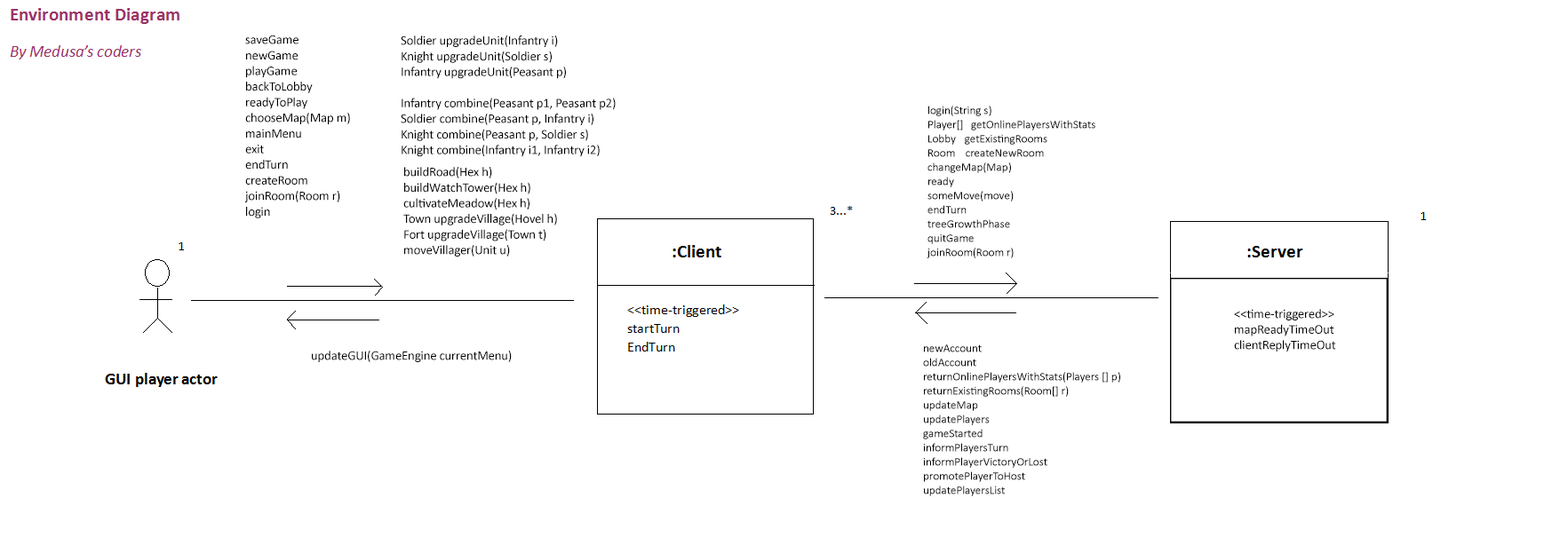
<style>
.page{position:relative;width:1568px;height:545px;background:#ffffff}
.page>*{position:absolute;margin:0}
.t1{font:13px "Calibri";letter-spacing:-0.01em;color:#000000}
.t2{font:11.8px "Calibri";letter-spacing:-0.01em;color:#000000}
</style>
<div class="page">
<p class="t1" style="left:244px;top:35px;width:106px;height:184px">saveGame<br>newGame<br>playGame<br>backToLobby<br>readyToPlay<br>chooseMap(Map m)<br>mainMenu<br>exit<br>endTurn<br>createRoom<br>joinRoom(Room r)<br>login</p>
<p class="t1" style="left:401px;top:36px;width:215px;height:121px">Soldier upgradeUnit(Infantry i)<br>Knight upgradeUnit(Soldier s)<br>Infantry upgradeUnit(Peasant p)<br><br>Infantry combine(Peasant p1, Peasant p2)<br>Soldier combine(Peasant p, Infantry i)<br>Knight combine(Peasant p, Soldier s)<br>Knight combine(Infantry i1, Infantry i2)</p>
<p class="t2" style="left:927px;top:106px;width:168px;height:153px">login(String s)<br>Player[]   getOnlinePlayersWithStats<br>Lobby   getExistingRooms<br>Room    createNewRoom<br>changeMap(Map)<br>ready<br>someMove(move) <br>endTurn<br>treeGrowthPhase<br>quitGame<br>joinRoom(Room r)</p>
<p class="t1" style="left:403px;top:167px;width:154px;height:90px">buildRoad(Hex h)<br>buildWatchTower(Hex h)<br>cultivateMeadow(Hex h)<br>Town upgradeVillage(Hovel h) <br>Fort upgradeVillage(Town t)<br>moveVillager(Unit u)</p>
<p class="t1" style="left:1234px;top:309px;width:102px;height:43px">&lt;&lt;time-triggered&gt;&gt;<br>  mapReadyTimeOut<br>  clientReplyTimeOut</p>
<p class="t1" style="left:312px;top:351px;width:200px;height:11px">updateGUI(GameEngine currentMenu)</p>
<p class="t2" style="left:923px;top:345px;width:197px;height:152px">newAccount<br>oldAccount<br>returnOnlinePlayersWithStats(Players [] p)<br>returnExistingRooms(Room[] r)<br>updateMap<br>updatePlayers<br>gameStarted<br>informPlayersTurn<br>informPlayerVictoryOrLost<br>promotePlayerToHost<br>updatePlayersList</p>
</div>
